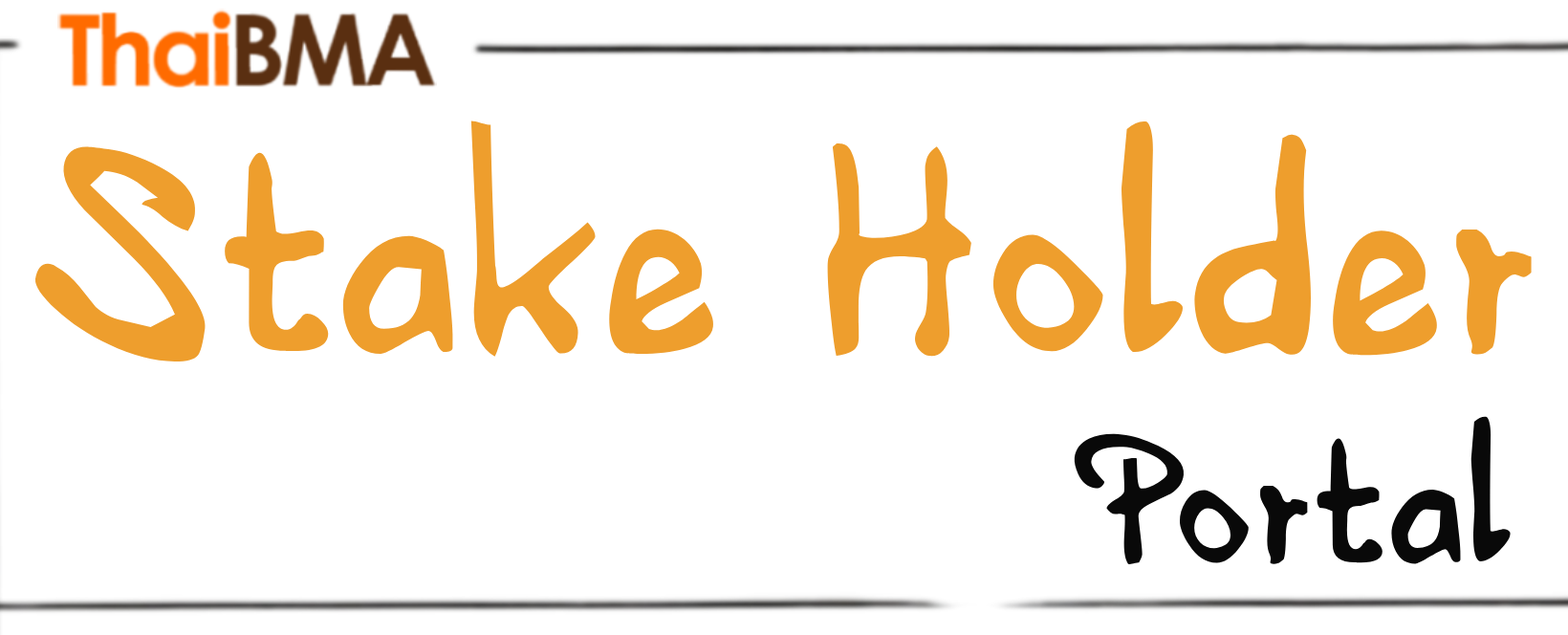
<style>
.page{position:relative;width:1568px;height:635px;background:#ffffff}
.page>*{position:absolute;margin:0}
.t1{font:303.5px "HVDEdding780-Normal";color:#ee9e2d}
.t2{font:190.2px "HVDEdding780-Normal";color:#090909}
</style>
<div class="page">
<p class="t1" style="left:35px;top:120px;width:1497px;height:241px">Stake Holder</p>
<p class="t2" style="left:1074px;top:416px;width:437px;height:149px">Portal</p>
</div>
